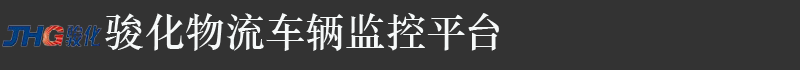
<style>
.page{position:relative;width:800px;height:70px;background:#333333}
.page>*{position:absolute;margin:0}
.t1{font:40px "STZhongsong";letter-spacing:0.05em;color:#f6f9f9}
</style>
<div class="page">
<p class="t1" style="left:105px;top:13px;width:394px;height:38px">骏化物流车辆监控平台</p>
</div>
